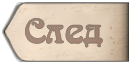
<style>
.page{position:relative;width:129px;height:64px}
.page>*{position:absolute;margin:0}
.t1{font:34px "ArnoldBocklinC";color:#a08373}
</style>
<div class="page">
<p class="t1" style="left:25px;top:18px;width:78px;height:29px">След</p>
</div>
